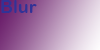
<style>
.page{position:relative;width:100px;height:50px}
.page>*{position:absolute;margin:0}
.t1{font:18px "ArialRoundedMTBold";color:#323296}
</style>
<div class="page">
<p class="t1" style="left:1px;top:0px;width:36px;height:13px">Blur</p>
</div>
